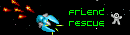
<style>
.page{position:relative;width:130px;height:35px;background:#000000}
.page>*{position:absolute;margin:0}
.t1{font:9px "Atmosphere";color:#00ff00}
</style>
<div class="page">
<p class="t1" style="left:69px;top:8px;width:35px;height:18px;text-align:center">Friend<br>Rescue</p>
</div>
